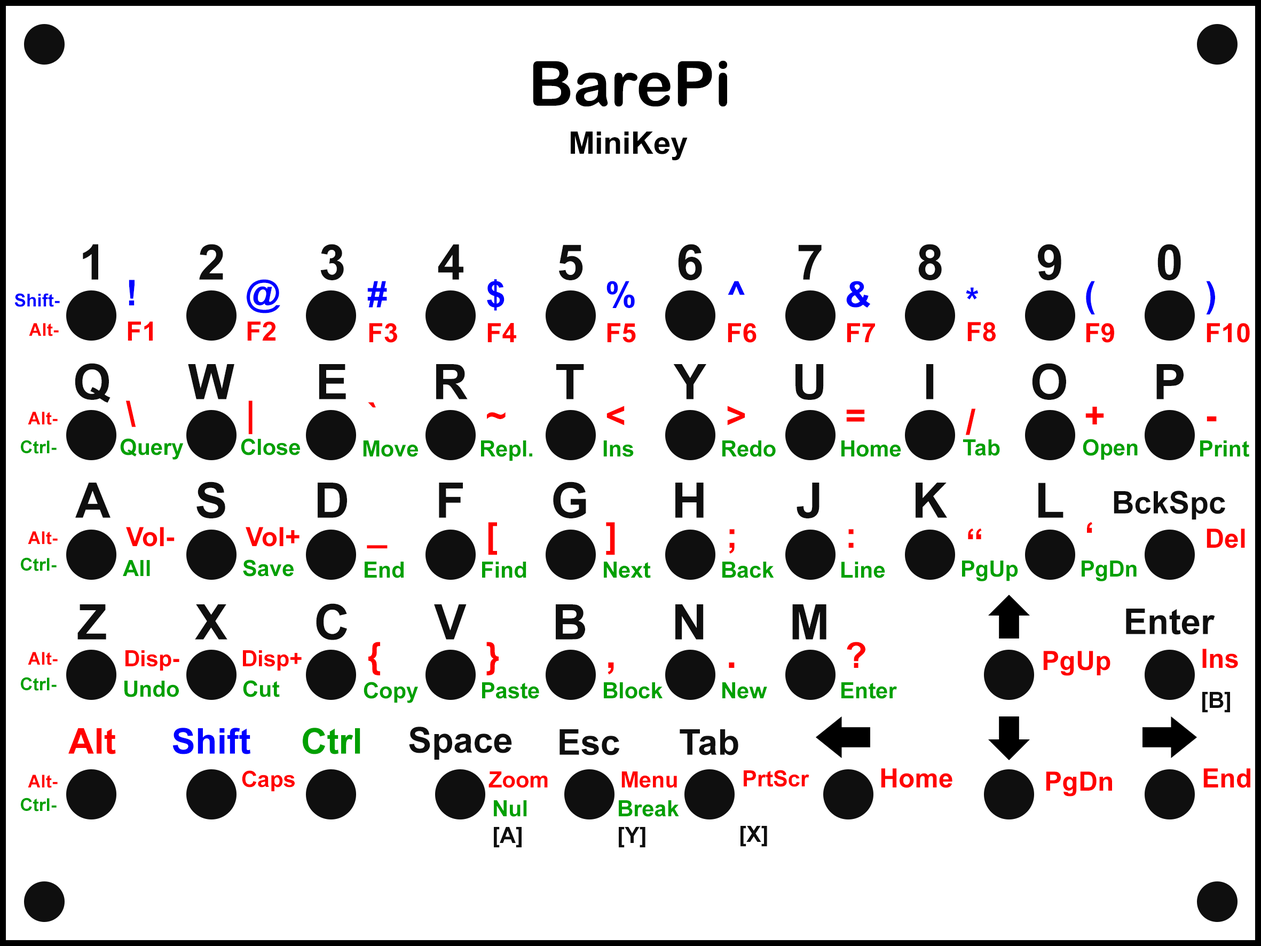
<style>
.page{position:relative;width:1261px;height:946px;background:#ffffff}
.page>*{position:absolute;margin:0}
.t1{font:62.3px "ArialRoundedMTBold";color:#000000}
.t2{font:31.1px "Arial-BoldMT";color:#000000}
.t3{font:48.9px "Arial-BoldMT";color:#0f0f0f}
.t4{font:35.6px "Arial-BoldMT";color:#0000ff}
.t5{font:17.8px "Arial-BoldMT";color:#0000ff}
.t6{font:17.8px "Arial-BoldMT";color:#ff0000}
.t7{font:26.7px "Arial-BoldMT";color:#ff0000}
.t8{font:35.6px "Arial-BoldMT";color:#ff0000}
.t9{font:17.8px "Arial-BoldMT";color:#00a000}
.t10{font:22.2px "Arial-BoldMT";color:#00a000}
.t11{font:31.1px "Arial-BoldMT";color:#0f0f0f}
.t12{font:35.6px "Arial-BoldMT";color:#0f0f0f}
.t13{font:22.2px "Arial-BoldMT";color:#ff0000}
.t14{font:40px "Arial-BoldMT";color:#ff0000}
.t15{font:22.2px "Arial-BoldMT";color:#0f0f0f}
.t16{font:35.6px "Arial-BoldMT";color:#00a000}
</style>
<div class="page">
<p class="t1" style="left:533px;top:60px;width:194px;height:47px">BarePi</p>
<p class="t2" style="left:571px;top:131px;width:116px;height:30px">MiniKey</p>
<p class="t3" style="left:83px;top:244px;width:15px;height:36px">1</p>
<p class="t3" style="left:199px;top:244px;width:24px;height:36px">2</p>
<p class="t3" style="left:320px;top:244px;width:24px;height:36px">3</p>
<p class="t3" style="left:438px;top:244px;width:25px;height:36px">4</p>
<p class="t3" style="left:559px;top:244px;width:24px;height:36px">5</p>
<p class="t3" style="left:678px;top:244px;width:24px;height:36px">6</p>
<p class="t3" style="left:798px;top:244px;width:23px;height:36px">7</p>
<p class="t3" style="left:918px;top:244px;width:24px;height:36px">8</p>
<p class="t3" style="left:1038px;top:244px;width:23px;height:36px">9</p>
<p class="t3" style="left:1157px;top:244px;width:24px;height:36px">0</p>
<p class="t4" style="left:129px;top:280px;width:6px;height:25px">!</p>
<p class="t4" style="left:247px;top:279px;width:33px;height:34px">@</p>
<p class="t4" style="left:367px;top:281px;width:20px;height:26px">#</p>
<p class="t4" style="left:487px;top:279px;width:17px;height:32px">$</p>
<p class="t4" style="left:606px;top:281px;width:29px;height:27px">%</p>
<p class="t4" style="left:728px;top:281px;width:17px;height:14px">^</p>
<p class="t4" style="left:846px;top:281px;width:25px;height:27px">&amp;</p>
<p class="t4" style="left:1086px;top:281px;width:9px;height:33px">(</p>
<p class="t4" style="left:1206px;top:281px;width:9px;height:33px">)</p>
<p class="t5" style="left:14px;top:293px;width:46px;height:14px">Shift-</p>
<p class="t4" style="left:966px;top:287px;width:12px;height:12px">*</p>
<p class="t6" style="left:29px;top:323px;width:30px;height:13px">Alt-</p>
<p class="t7" style="left:128px;top:321px;width:25px;height:20px">F1</p>
<p class="t7" style="left:247px;top:321px;width:28px;height:20px">F2</p>
<p class="t7" style="left:369px;top:323px;width:28px;height:20px">F3</p>
<p class="t7" style="left:487px;top:323px;width:29px;height:19px">F4</p>
<p class="t7" style="left:607px;top:323px;width:29px;height:20px">F5</p>
<p class="t7" style="left:728px;top:323px;width:28px;height:20px">F6</p>
<p class="t7" style="left:847px;top:323px;width:28px;height:19px">F7</p>
<p class="t7" style="left:967px;top:322px;width:28px;height:20px">F8</p>
<p class="t7" style="left:1086px;top:323px;width:28px;height:20px">F9</p>
<p class="t7" style="left:1206px;top:323px;width:44px;height:20px">F10</p>
<p class="t3" style="left:75px;top:363px;width:35px;height:40px">Q</p>
<p class="t3" style="left:188px;top:364px;width:46px;height:35px">W</p>
<p class="t3" style="left:319px;top:364px;width:27px;height:35px">E</p>
<p class="t3" style="left:436px;top:364px;width:32px;height:35px">R</p>
<p class="t3" style="left:556px;top:364px;width:28px;height:35px">T</p>
<p class="t3" style="left:673px;top:364px;width:33px;height:35px">Y</p>
<p class="t3" style="left:795px;top:364px;width:29px;height:36px">U</p>
<p class="t3" style="left:926px;top:364px;width:8px;height:35px">I</p>
<p class="t3" style="left:1032px;top:363px;width:34px;height:37px">O</p>
<p class="t3" style="left:1156px;top:364px;width:27px;height:35px">P</p>
<p class="t8" style="left:125px;top:400px;width:11px;height:27px">\</p>
<p class="t8" style="left:248px;top:400px;width:4px;height:34px">|</p>
<p class="t8" style="left:368px;top:402px;width:8px;height:6px">`</p>
<p class="t6" style="left:28px;top:412px;width:30px;height:13px">Alt-</p>
<p class="t8" style="left:487px;top:412px;width:18px;height:7px">~</p>
<p class="t8" style="left:606px;top:406px;width:18px;height:19px">&lt;</p>
<p class="t8" style="left:727px;top:406px;width:18px;height:19px">&gt;</p>
<p class="t8" style="left:846px;top:409px;width:19px;height:13px">=</p>
<p class="t8" style="left:965px;top:408px;width:11px;height:27px">/</p>
<p class="t8" style="left:1085px;top:406px;width:19px;height:18px">+</p>
<p class="t8" style="left:1206px;top:416px;width:10px;height:6px">-</p>
<p class="t9" style="left:21px;top:440px;width:36px;height:14px">Ctrl-</p>
<p class="t10" style="left:120px;top:438px;width:64px;height:22px">Query</p>
<p class="t10" style="left:241px;top:438px;width:59px;height:17px">Close</p>
<p class="t10" style="left:363px;top:440px;width:55px;height:17px">Move</p>
<p class="t10" style="left:481px;top:440px;width:51px;height:21px">Repl.</p>
<p class="t10" style="left:603px;top:440px;width:31px;height:17px">Ins</p>
<p class="t10" style="left:722px;top:440px;width:54px;height:17px">Redo</p>
<p class="t10" style="left:841px;top:440px;width:60px;height:17px">Home</p>
<p class="t10" style="left:963px;top:439px;width:37px;height:17px">Tab</p>
<p class="t10" style="left:1082px;top:439px;width:55px;height:21px">Open</p>
<p class="t10" style="left:1200px;top:440px;width:49px;height:17px">Print</p>
<p class="t3" style="left:75px;top:483px;width:35px;height:35px">A</p>
<p class="t3" style="left:196px;top:481px;width:29px;height:37px">S</p>
<p class="t3" style="left:318px;top:483px;width:29px;height:35px">D</p>
<p class="t3" style="left:439px;top:483px;width:24px;height:35px">F</p>
<p class="t3" style="left:553px;top:481px;width:33px;height:37px">G</p>
<p class="t3" style="left:675px;top:483px;width:28px;height:35px">H</p>
<p class="t3" style="left:796px;top:483px;width:23px;height:35px">J</p>
<p class="t3" style="left:915px;top:483px;width:32px;height:35px">K</p>
<p class="t3" style="left:1038px;top:483px;width:25px;height:35px">L</p>
<p class="t11" style="left:1113px;top:491px;width:112px;height:29px">BckSpc</p>
<p class="t8" style="left:1087px;top:521px;width:5px;height:12px">‘</p>
<p class="t6" style="left:28px;top:531px;width:30px;height:13px">Alt-</p>
<p class="t7" style="left:126px;top:527px;width:49px;height:20px">Vol-</p>
<p class="t7" style="left:246px;top:527px;width:53px;height:20px">Vol+</p>
<p class="t8" style="left:488px;top:522px;width:9px;height:33px">[</p>
<p class="t8" style="left:606px;top:522px;width:9px;height:33px">]</p>
<p class="t8" style="left:729px;top:529px;width:5px;height:25px">;</p>
<p class="t8" style="left:848px;top:529px;width:5px;height:19px">:</p>
<p class="t8" style="left:968px;top:528px;width:14px;height:11px">“</p>
<p class="t7" style="left:1206px;top:528px;width:39px;height:20px">Del</p>
<p class="t8" style="left:367px;top:545px;width:21px;height:4px">_</p>
<p class="t9" style="left:21px;top:557px;width:36px;height:14px">Ctrl-</p>
<p class="t10" style="left:123px;top:560px;width:27px;height:16px">All</p>
<p class="t10" style="left:243px;top:559px;width:51px;height:17px">Save</p>
<p class="t10" style="left:365px;top:562px;width:39px;height:16px">End</p>
<p class="t10" style="left:482px;top:562px;width:44px;height:16px">Find</p>
<p class="t10" style="left:604px;top:562px;width:47px;height:16px">Next</p>
<p class="t10" style="left:722px;top:562px;width:52px;height:16px">Back</p>
<p class="t10" style="left:841px;top:562px;width:44px;height:16px">Line</p>
<p class="t10" style="left:962px;top:560px;width:56px;height:21px">PgUp</p>
<p class="t10" style="left:1081px;top:560px;width:55px;height:21px">PgDn</p>
<p class="t3" style="left:77px;top:604px;width:29px;height:35px">Z</p>
<p class="t3" style="left:195px;top:604px;width:32px;height:35px">X</p>
<p class="t3" style="left:316px;top:603px;width:31px;height:37px">C</p>
<p class="t3" style="left:434px;top:604px;width:33px;height:35px">V</p>
<p class="t3" style="left:556px;top:604px;width:29px;height:35px">B</p>
<p class="t3" style="left:675px;top:604px;width:28px;height:35px">N</p>
<p class="t3" style="left:792px;top:604px;width:34px;height:35px">M</p>
<p class="t12" style="left:1126px;top:608px;width:89px;height:27px">Enter</p>
<p class="t8" style="left:368px;top:642px;width:12px;height:33px">{</p>
<p class="t8" style="left:486px;top:642px;width:13px;height:33px">}</p>
<p class="t8" style="left:847px;top:642px;width:18px;height:26px">?</p>
<p class="t6" style="left:28px;top:652px;width:30px;height:13px">Alt-</p>
<p class="t13" style="left:125px;top:650px;width:54px;height:21px">Disp-</p>
<p class="t13" style="left:243px;top:650px;width:59px;height:21px">Disp+</p>
<p class="t7" style="left:1043px;top:651px;width:67px;height:25px">PgUp</p>
<p class="t7" style="left:1202px;top:649px;width:36px;height:19px">Ins</p>
<p class="t14" style="left:607px;top:662px;width:7px;height:13px">,</p>
<p class="t14" style="left:729px;top:662px;width:5px;height:6px">.</p>
<p class="t9" style="left:21px;top:677px;width:36px;height:14px">Ctrl-</p>
<p class="t10" style="left:124px;top:681px;width:55px;height:16px">Undo</p>
<p class="t10" style="left:243px;top:680px;width:37px;height:17px">Cut</p>
<p class="t10" style="left:363px;top:682px;width:55px;height:21px">Copy</p>
<p class="t10" style="left:482px;top:682px;width:57px;height:17px">Paste</p>
<p class="t10" style="left:604px;top:682px;width:58px;height:17px">Block</p>
<p class="t10" style="left:722px;top:682px;width:45px;height:17px">New</p>
<p class="t10" style="left:841px;top:682px;width:56px;height:17px">Enter</p>
<p class="t15" style="left:1202px;top:692px;width:28px;height:21px">[B]</p>
<p class="t8" style="left:68px;top:728px;width:48px;height:26px">Alt</p>
<p class="t4" style="left:172px;top:728px;width:78px;height:26px">Shift</p>
<p class="t16" style="left:303px;top:728px;width:57px;height:26px">Ctrl</p>
<p class="t12" style="left:409px;top:726px;width:103px;height:34px">Space</p>
<p class="t12" style="left:559px;top:729px;width:61px;height:26px">Esc</p>
<p class="t12" style="left:679px;top:729px;width:59px;height:26px">Tab</p>
<p class="t13" style="left:242px;top:770px;width:53px;height:22px">Caps</p>
<p class="t13" style="left:488px;top:771px;width:60px;height:17px">Zoom</p>
<p class="t13" style="left:621px;top:771px;width:56px;height:17px">Menu</p>
<p class="t13" style="left:744px;top:770px;width:65px;height:17px">PrtScr</p>
<p class="t7" style="left:881px;top:768px;width:71px;height:20px">Home</p>
<p class="t7" style="left:1046px;top:771px;width:66px;height:25px">PgDn</p>
<p class="t7" style="left:1203px;top:768px;width:47px;height:20px">End</p>
<p class="t6" style="left:28px;top:774px;width:30px;height:14px">Alt-</p>
<p class="t9" style="left:21px;top:797px;width:36px;height:14px">Ctrl-</p>
<p class="t10" style="left:494px;top:800px;width:33px;height:48px">Nul<br><span class="t15">[A]</span></p>
<p class="t10" style="left:619px;top:800px;width:60px;height:48px">Break<br><span class="t15">[Y]</span></p>
<p class="t15" style="left:740px;top:826px;width:27px;height:21px">[X]</p>
</div>
